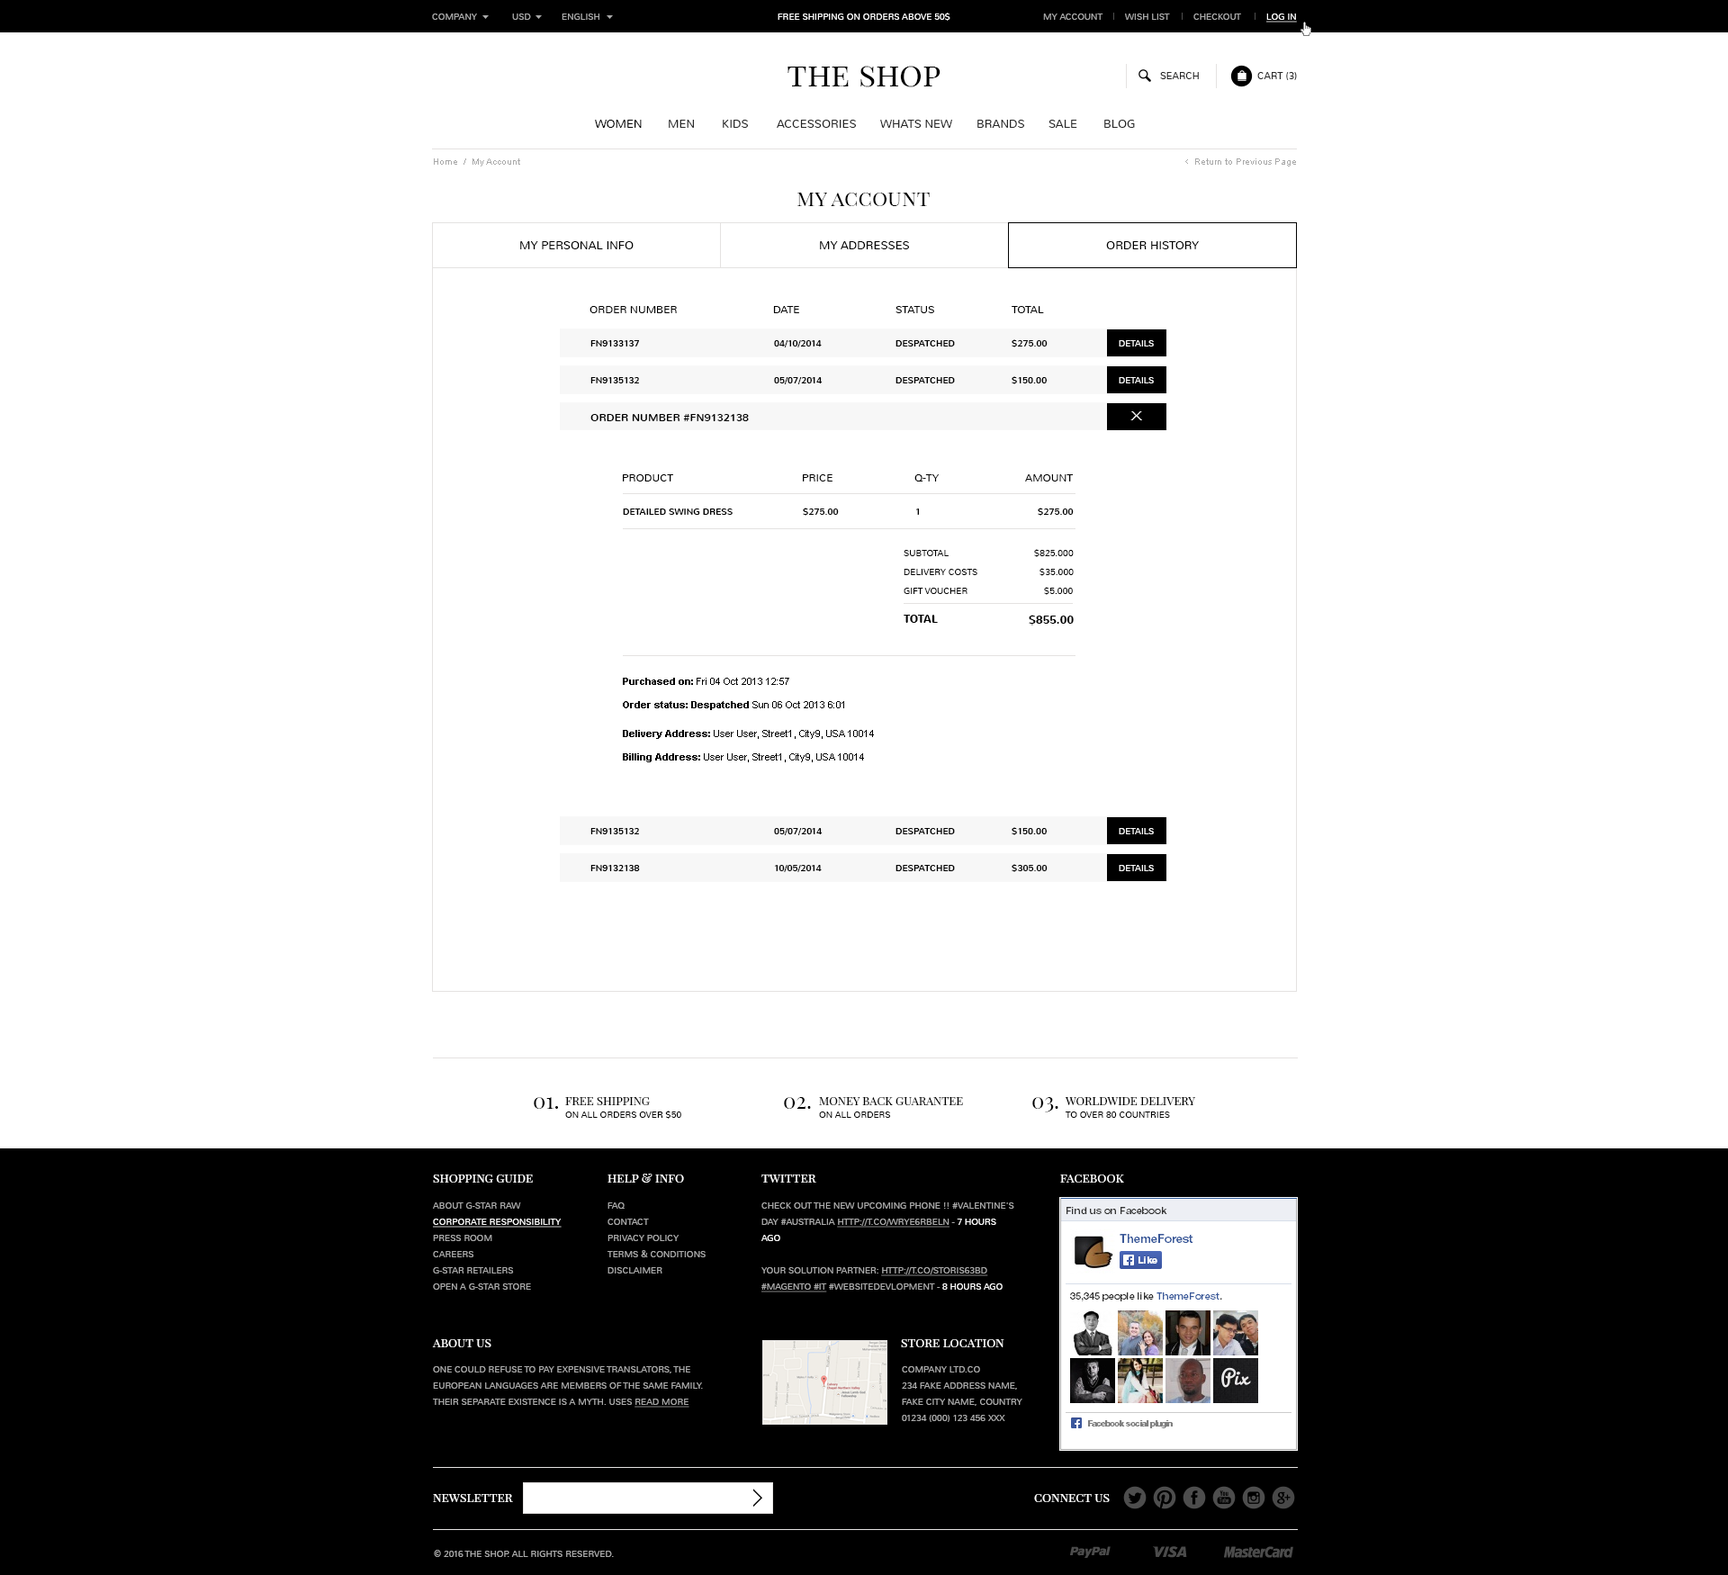
<style>
.page{position:relative;width:1728px;height:1575px;background:#ffffff}
.page>*{position:absolute;margin:0}
.t1{font:9px "Nunito-Light";color:#aaaaaa;text-transform:uppercase}
.t2{font:9px "Nunito-Light";color:#ffffff;text-transform:uppercase}
.t3{font:9px "Nunito-Light";color:#ffffff;text-transform:uppercase;text-decoration:underline}
.t4{font:32.4px "PlayfairDisplaySC-Regular";color:#000000}
.t5{font:9.9px "Nunito-Light";color:#282828;text-transform:uppercase}
.t6{font:11.7px "Nunito-Light";color:#000000;text-transform:uppercase}
.t7{font:11.7px "Nunito-Light";color:#282828;text-transform:uppercase}
.t8{font:9px "ArialMT";color:#aaaaaa}
.t9{font:10.8px "Cabin-Regular";color:#aaaaaa}
.t10{font:21.6px "PlayfairDisplaySC-Regular";color:#000000}
.t11{font:10.8px "Nunito-Light";color:#000000;text-transform:uppercase}
.t12{font:9px "Nunito-Regular";color:#000000;text-transform:uppercase}
.t13{font:10.8px "Nunito-Regular";color:#000000;text-transform:uppercase}
.t14{font:12.6px "EuropeExtNormal";color:#ffffff;text-transform:uppercase}
.t15{font:9px "Nunito-Light";color:#000000;text-transform:uppercase}
.t16{font:10.8px "Nunito-Bold";color:#000000;text-transform:uppercase}
.t17{font:9.9px "Arial-BoldMT";color:#000000}
.t18{font:9.9px "ArialMT";color:#000000}
.t19{font:11.7px "PlayfairDisplaySC-Regular";color:#000000;text-transform:uppercase}
.t20{font:12.6px "PlayfairDisplaySC-Regular";color:#ffffff}
.t21{font:9px/16.2px "Nunito-Light";color:#aaaaaa;text-transform:uppercase}
.t22{font:9px/16.2px "Nunito-Light";color:#ffffff;text-transform:uppercase;text-decoration:underline}
.t23{font:9px/16.2px "Nunito-Light";color:#aaaaaa;text-transform:uppercase;text-decoration:underline}
.t24{font:9px/16.2px "Nunito-Light";color:#ffffff;text-transform:uppercase}
</style>
<div class="page">
<p class="t1" style="left:432px;top:13px;width:45px;height:7px">company</p>
<p class="t1" style="left:512px;top:13px;width:19px;height:7px">usD</p>
<p class="t1" style="left:562px;top:13px;width:37px;height:7px">English</p>
<p class="t2" style="left:778px;top:13px;width:172px;height:8px">free shipping on orders above 50$</p>
<p class="t1" style="left:1043px;top:13px;width:60px;height:7px">my account</p>
<p class="t1" style="left:1125px;top:13px;width:45px;height:7px">wish list</p>
<p class="t1" style="left:1193px;top:13px;width:48px;height:7px">Checkout</p>
<p class="t3" style="left:1266px;top:13px;width:31px;height:9px">log in</p>
<p class="t4" style="left:787px;top:66px;width:153px;height:21px">the shop</p>
<p class="t5" style="left:1160px;top:72px;width:39px;height:7px">search</p>
<p class="t5" style="left:1257px;top:72px;width:40px;height:8px">Cart (3)</p>
<p class="t6" style="left:595px;top:120px;width:47px;height:8px">women</p>
<p class="t7" style="left:669px;top:120px;width:25px;height:8px">men</p>
<p class="t7" style="left:723px;top:120px;width:25px;height:8px">kids</p>
<p class="t7" style="left:777px;top:120px;width:79px;height:8px">accessories</p>
<p class="t7" style="left:880px;top:120px;width:72px;height:8px">whats new</p>
<p class="t7" style="left:977px;top:120px;width:47px;height:8px">brands</p>
<p class="t7" style="left:1048px;top:120px;width:29px;height:8px">sale</p>
<p class="t7" style="left:1104px;top:120px;width:31px;height:8px">blog</p>
<p class="t8" style="left:434px;top:158px;width:86px;height:8px">Home  /  My Account</p>
<p class="t9" style="left:1185px;top:159px;width:3px;height:5px">&lt;</p>
<p class="t8" style="left:1195px;top:158px;width:101px;height:8px">Return to Previous Page</p>
<p class="t10" style="left:797px;top:193px;width:133px;height:13px">my account</p>
<p class="t6" style="left:520px;top:241px;width:114px;height:8px">my personal info</p>
<p class="t6" style="left:820px;top:241px;width:89px;height:8px">my addresses</p>
<p class="t6" style="left:1106px;top:241px;width:93px;height:8px">order history</p>
<p class="t11" style="left:589px;top:306px;width:88px;height:7px">order number</p>
<p class="t11" style="left:773px;top:306px;width:26px;height:7px">date</p>
<p class="t11" style="left:895px;top:306px;width:39px;height:7px">status</p>
<p class="t11" style="left:1012px;top:306px;width:32px;height:7px">total</p>
<p class="t12" style="left:590px;top:340px;width:49px;height:6px">FN9133137</p>
<p class="t12" style="left:774px;top:340px;width:48px;height:7px">04/10/2014</p>
<p class="t12" style="left:895px;top:340px;width:60px;height:6px">Despatched</p>
<p class="t12" style="left:1012px;top:339px;width:36px;height:8px">$275.00</p>
<p class="t2" style="left:1119px;top:340px;width:35px;height:6px">details</p>
<p class="t12" style="left:590px;top:377px;width:49px;height:6px">FN9135132</p>
<p class="t12" style="left:774px;top:377px;width:49px;height:7px">05/07/2014</p>
<p class="t12" style="left:895px;top:377px;width:60px;height:6px">Despatched</p>
<p class="t12" style="left:1012px;top:376px;width:35px;height:8px">$150.00</p>
<p class="t2" style="left:1119px;top:377px;width:35px;height:6px">details</p>
<p class="t13" style="left:590px;top:414px;width:159px;height:7px">Order number #FN9132138</p>
<p class="t14" style="left:1130px;top:411px;width:12px;height:9px">X</p>
<p class="t11" style="left:623px;top:474px;width:50px;height:7px">product</p>
<p class="t11" style="left:803px;top:474px;width:29px;height:7px">price</p>
<p class="t11" style="left:914px;top:474px;width:25px;height:7px">q-ty</p>
<p class="t11" style="left:1025px;top:474px;width:48px;height:7px">amount</p>
<p class="t12" style="left:623px;top:508px;width:110px;height:7px">detailed swing dress</p>
<p class="t12" style="left:803px;top:508px;width:36px;height:8px">$275.00</p>
<p class="t12" style="left:915px;top:508px;width:4px;height:7px">1</p>
<p class="t12" style="left:1038px;top:508px;width:36px;height:8px">$275.00</p>
<p class="t15" style="left:904px;top:550px;width:45px;height:6px">subtotal</p>
<p class="t15" style="left:1034px;top:549px;width:40px;height:8px">$825.000</p>
<p class="t15" style="left:904px;top:569px;width:73px;height:6px">delivery costs</p>
<p class="t15" style="left:1039px;top:568px;width:35px;height:8px">$35.000</p>
<p class="t15" style="left:904px;top:588px;width:63px;height:6px">gift voucher</p>
<p class="t15" style="left:1044px;top:587px;width:29px;height:8px">$5.000</p>
<p class="t16" style="left:904px;top:615px;width:34px;height:8px">total</p>
<p class="t16" style="left:1029px;top:615px;width:45px;height:10px">$855.00</p>
<p class="t17" style="left:623px;top:678px;width:221px;height:32px">Purchased on:<span class="t18"> Fri 04 Oct 2013 12:57<br><br></span>Order status: Despatched<span class="t18"> Sun 06 Oct 2013 6:01</span></p>
<p class="t18" style="left:623px;top:730px;width:251px;height:32px"><span class="t17">Delivery Address: </span>User User, Street1, City9, USA 10014<br><br><span class="t17">Billing Address: </span>User User, Street1, City9, USA 10014</p>
<p class="t12" style="left:590px;top:828px;width:49px;height:6px">FN9135132</p>
<p class="t12" style="left:774px;top:828px;width:49px;height:7px">05/07/2014</p>
<p class="t12" style="left:895px;top:828px;width:60px;height:6px">Despatched</p>
<p class="t12" style="left:1012px;top:827px;width:35px;height:8px">$150.00</p>
<p class="t2" style="left:1119px;top:828px;width:35px;height:6px">details</p>
<p class="t12" style="left:590px;top:865px;width:50px;height:6px">FN9132138</p>
<p class="t12" style="left:774px;top:865px;width:48px;height:7px">10/05/2014</p>
<p class="t12" style="left:895px;top:865px;width:60px;height:6px">Despatched</p>
<p class="t12" style="left:1012px;top:864px;width:36px;height:8px">$305.00</p>
<p class="t2" style="left:1119px;top:865px;width:35px;height:6px">details</p>
<p class="t10" style="left:534px;top:1097px;width:24px;height:12px">01.</p>
<p class="t19" style="left:565px;top:1097px;width:85px;height:8px">Free Shipping</p>
<p class="t10" style="left:784px;top:1097px;width:27px;height:12px">02.</p>
<p class="t19" style="left:819px;top:1097px;width:144px;height:8px">Money back guarantee</p>
<p class="t10" style="left:1032px;top:1097px;width:26px;height:15px">03.</p>
<p class="t19" style="left:1065px;top:1097px;width:130px;height:8px">Worldwide Delivery</p>
<p class="t15" style="left:565px;top:1111px;width:116px;height:8px">On all orders over $50</p>
<p class="t15" style="left:819px;top:1111px;width:72px;height:7px">On all orders</p>
<p class="t15" style="left:1066px;top:1111px;width:104px;height:7px">To over 80 countries</p>
<p class="t20" style="left:433px;top:1174px;width:100px;height:9px">shopping guide</p>
<p class="t20" style="left:607px;top:1174px;width:77px;height:9px">help &amp; info</p>
<p class="t20" style="left:761px;top:1174px;width:55px;height:9px">twitter</p>
<p class="t20" style="left:1060px;top:1174px;width:64px;height:9px">facebook</p>
<p class="t21" style="left:433px;top:1202px;width:129px;height:88px">About G-Star Raw<br><span class="t22">Corporate Responsibility<br></span>Press Room<br>Careers<br>G-Star Retailers<br>Open a G-Star Store</p>
<p class="t21" style="left:607px;top:1202px;width:99px;height:71px">FAQ<br>Contact<br>Privacy Policy<br>Terms &amp; Conditions<br>Disclaimer</p>
<p class="t21" style="left:761px;top:1202px;width:253px;height:90px">check out the new upcoming phone !! #Valentine's Day #Australia <span class="t23">http://t.co/wRye6rBElN</span> - <span class="t24">7 hours ago<br></span><br>your solution partner: <span class="t23">http://t.co/StOrIs63bd #magento #IT</span> #websitedevlopment - <span class="t24">8 hours ago</span></p>
<p class="t20" style="left:432px;top:1339px;width:59px;height:8px">about us</p>
<p class="t20" style="left:901px;top:1339px;width:103px;height:8px">store location</p>
<p class="t21" style="left:433px;top:1366px;width:270px;height:42px">One could refuse to pay expensive translators, the European languages are members of the same family. Their separate existence is a myth. Uses <span class="t23">read more</span></p>
<p class="t21" style="left:902px;top:1366px;width:120px;height:56px">Company ltd.co<br>234 Fake address name,<br>Fake city name, Country<br>01234 (000) 123 456 xxx</p>
<p class="t20" style="left:433px;top:1494px;width:80px;height:8px">newsletter</p>
<p class="t20" style="left:1034px;top:1494px;width:76px;height:8px">connect us</p>
<p class="t1" style="left:434px;top:1550px;width:180px;height:7px">© 2016 the shop. All Rights Reserved.</p>
</div>
